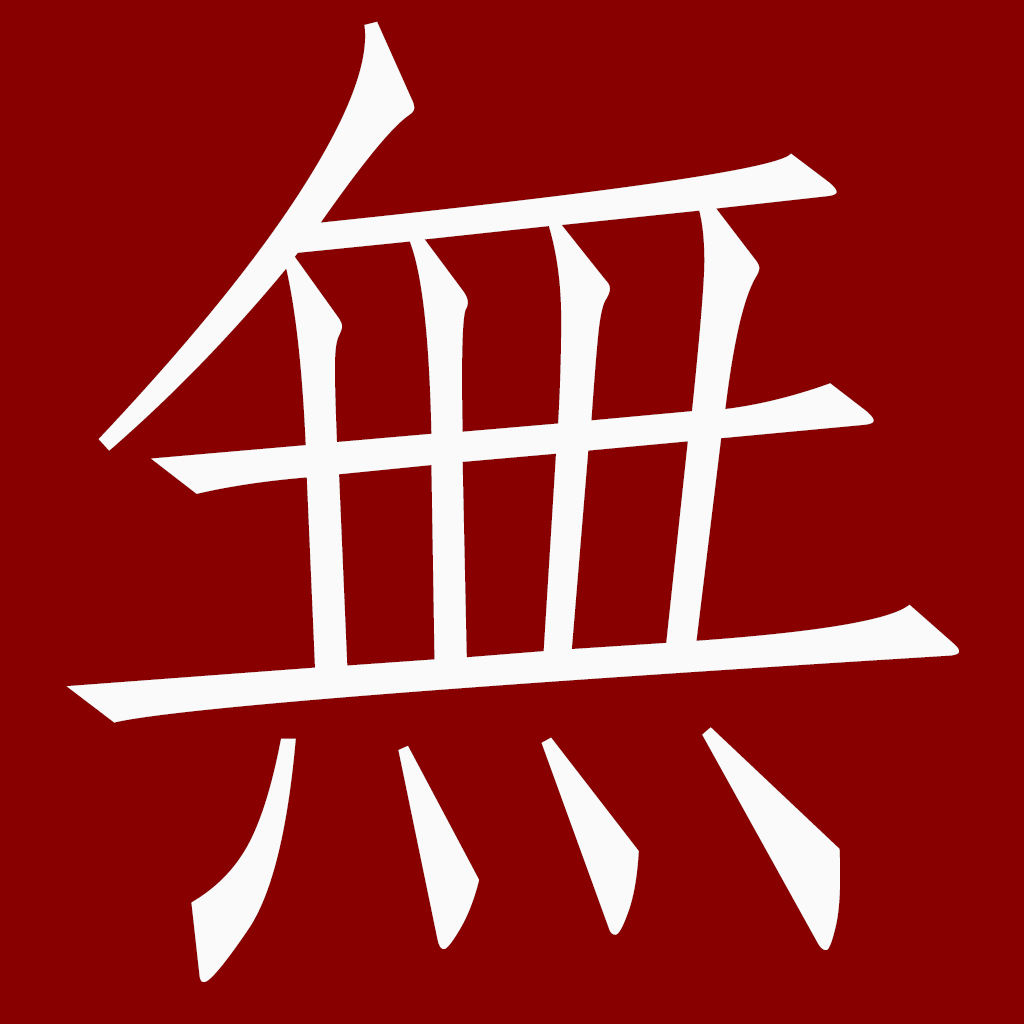
<style>
.page{position:relative;width:1024px;height:1024px;background:#880000}
.page>*{position:absolute;margin:0}
.t1{font:1030px "STFangsong";color:#fafafa}
</style>
<div class="page">
<p class="t1" style="left:66px;top:21px;width:893px;height:961px">無</p>
</div>
